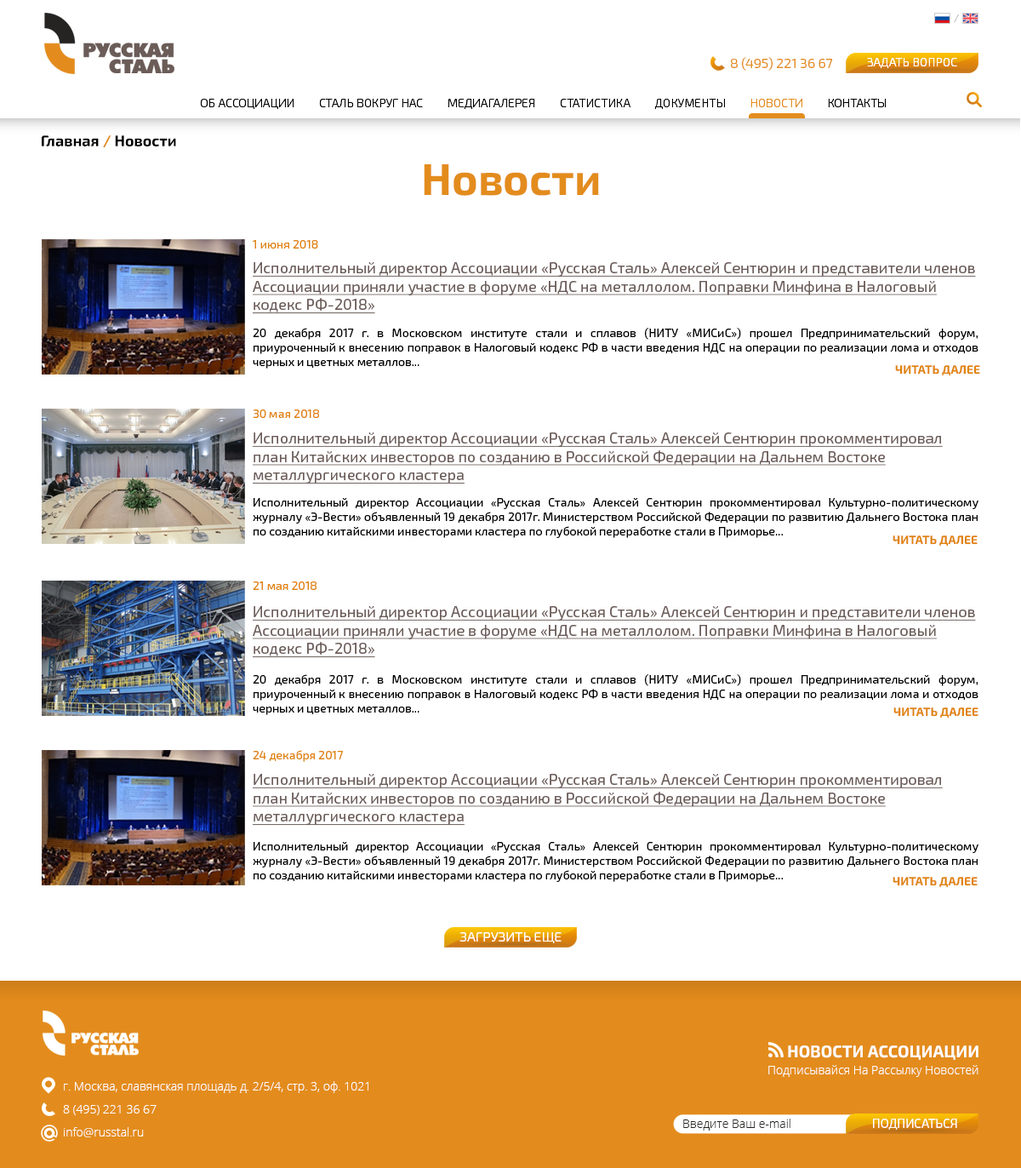
<style>
.page{position:relative;width:1021px;height:1168px;background:#ffffff}
.page>*{position:absolute;margin:0}
.t1{font:10.2px "Exo2.0-Medium";color:#c3c3c3}
.t2{font:13.6px "Exo2.0-Light";color:#e38c1d}
.t3{font:12px "Exo2.0-Light";color:#ffffff}
.t4{font:11.9px "Exo2.0-Light";color:#000000}
.t5{font:11.9px "Exo2.0-Light";color:#e38c1d}
.t6{font:15.3px "Exo2.0-Bold";color:#000000}
.t7{font:15.3px "Exo2.0-Bold";color:#e38c1d}
.t8{font:44.2px "Exo2.0-Bold";color:#e38c1d}
.t9{font:11.9px "Exo2.0-Regular";color:#e1840e}
.t10{font:15.3px "Exo2.0-Regular";color:#6b5c58;text-decoration:underline}
.t11{font:11.9px "Exo2.0-Regular";color:#000000}
.t12{font:11.9px "Exo2.0-Bold";color:#e1840e}
.t13{font:13.6px "Exo2.0-Light";color:#ffffff}
.t14{font:16.7px "Exo2.0-Bold";color:#ffffff}
.t15{font:11.9px "OpenSans-Light";color:#ffffff}
.t16{font:11.9px/23px "OpenSans-Light";color:#ffffff}
.t17{font:11.9px "OpenSans-Light";color:#252422}
.t18{font:12.6px "Exo2.0-Light";color:#ffffff}
</style>
<div class="page">
<p class="t1" style="left:954px;top:14px;width:5px;height:9px">/</p>
<p class="t2" style="left:731px;top:57px;width:102px;height:14px">8 (495) 221 36 67</p>
<p class="t3" style="left:867px;top:58px;width:90px;height:11px">ЗАДАТЬ ВОПРОС</p>
<p class="t4" style="left:200px;top:98px;width:687px;height:12px">ОБ АССОЦИАЦИИ         СТАЛЬ ВОКРУГ НАС         МЕДИАГАЛЕРЕЯ         СТАТИСТИКА         ДОКУМЕНТЫ         <span class="t5">НОВОСТИ</span>         КОНТАКТЫ</p>
<p class="t6" style="left:42px;top:135px;width:134px;height:12px">Главная <span class="t7">/</span> Новости</p>
<p class="t8" style="left:424px;top:164px;width:175px;height:32px">Новости</p>
<p class="t9" style="left:253px;top:240px;width:65px;height:9px">1 июня 2018</p>
<p class="t10" style="left:253px;top:262px;width:723px;height:52px">Исполнительный директор Ассоциации «Русская Сталь» Алексей Сентюрин и представители членов Ассоциации приняли участие в форуме «НДС на металлолом. Поправки Минфина в Налоговый кодекс РФ-2018»</p>
<p class="t11" style="left:253px;top:328px;width:726px;height:40px;text-align:justify">20 декабря 2017 г. в Московском институте стали и сплавов (НИТУ «МИСиС») прошел Предпринимательский форум, приуроченный к внесению поправок в Налоговый кодекс РФ в части введения НДС на операции по реализации лома и отходов черных и цветных металлов...</p>
<p class="t12" style="left:895px;top:365px;width:85px;height:11px">ЧИТАТЬ ДАЛЕЕ</p>
<p class="t9" style="left:253px;top:409px;width:66px;height:9px">30 мая 2018</p>
<p class="t10" style="left:253px;top:432px;width:690px;height:52px">Исполнительный директор Ассоциации «Русская Сталь» Алексей Сентюрин прокомментировал план Китайских инвесторов по созданию в Российской Федерации на Дальнем Востоке металлургического кластера</p>
<p class="t11" style="left:253px;top:498px;width:726px;height:40px;text-align:justify">Исполнительный директор Ассоциации «Русская Сталь» Алексей Сентюрин прокомментировал Культурно-политическому журналу «Э-Вести» объявленный 19 декабря 2017г. Министерством Российской Федерации по развитию Дальнего Востока план по созданию китайскими инвесторами кластера по глубокой переработке стали в Приморье...</p>
<p class="t12" style="left:893px;top:535px;width:85px;height:11px">ЧИТАТЬ ДАЛЕЕ</p>
<p class="t9" style="left:253px;top:581px;width:64px;height:9px">21 мая 2018</p>
<p class="t10" style="left:253px;top:606px;width:723px;height:52px">Исполнительный директор Ассоциации «Русская Сталь» Алексей Сентюрин и представители членов Ассоциации приняли участие в форуме «НДС на металлолом. Поправки Минфина в Налоговый кодекс РФ-2018»</p>
<p class="t11" style="left:253px;top:674px;width:726px;height:41px;text-align:justify">20 декабря 2017 г. в Московском институте стали и сплавов (НИТУ «МИСиС») прошел Предпринимательский форум, приуроченный к внесению поправок в Налоговый кодекс РФ в части введения НДС на операции по реализации лома и отходов черных и цветных металлов...</p>
<p class="t12" style="left:894px;top:707px;width:85px;height:11px">ЧИТАТЬ ДАЛЕЕ</p>
<p class="t9" style="left:253px;top:750px;width:90px;height:12px">24 декабря 2017</p>
<p class="t10" style="left:253px;top:774px;width:690px;height:52px">Исполнительный директор Ассоциации «Русская Сталь» Алексей Сентюрин прокомментировал план Китайских инвесторов по созданию в Российской Федерации на Дальнем Востоке металлургического кластера</p>
<p class="t11" style="left:253px;top:842px;width:726px;height:40px;text-align:justify">Исполнительный директор Ассоциации «Русская Сталь» Алексей Сентюрин прокомментировал Культурно-политическому журналу «Э-Вести» объявленный 19 декабря 2017г. Министерством Российской Федерации по развитию Дальнего Востока план по созданию китайскими инвесторами кластера по глубокой переработке стали в Приморье...</p>
<p class="t12" style="left:893px;top:877px;width:85px;height:11px">ЧИТАТЬ ДАЛЕЕ</p>
<p class="t13" style="left:460px;top:932px;width:102px;height:11px">ЗАГРУЗИТЬ ЕЩЕ</p>
<p class="t14" style="left:788px;top:1045px;width:191px;height:15px">НОВОСТИ АССОЦИАЦИИ</p>
<p class="t15" style="left:768px;top:1065px;width:211px;height:12px">Подписывайся На Рассылку Новостей</p>
<p class="t16" style="left:63px;top:1081px;width:305px;height:56px">г. Москва, славянская площадь д. 2/5/4, стр. 3, оф. 1021<br>8 (495) 221 36 67<br>info@russtal.ru</p>
<p class="t17" style="left:683px;top:1118px;width:108px;height:12px">Введите Ваш e-mail</p>
<p class="t18" style="left:873px;top:1118px;width:84px;height:11px">ПОДПИСАТЬСЯ</p>
</div>
